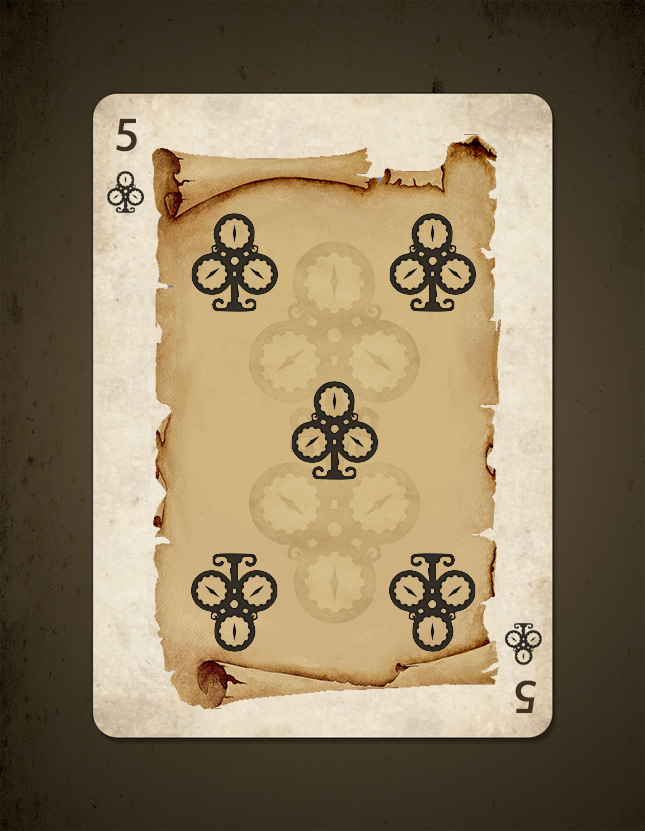
<style>
.page{position:relative;width:645px;height:831px}
.page>*{position:absolute;margin:0}
.t1{font:48px "MyriadPro-Regular";color:#3f3222;font-weight:bold}
</style>
<div class="page">
<p class="t1" style="left:116px;top:118px;width:21px;height:34px">5</p>
<p class="t1" style="left:515px;top:680px;width:21px;height:33px;rotate:180deg">5</p>
</div>
